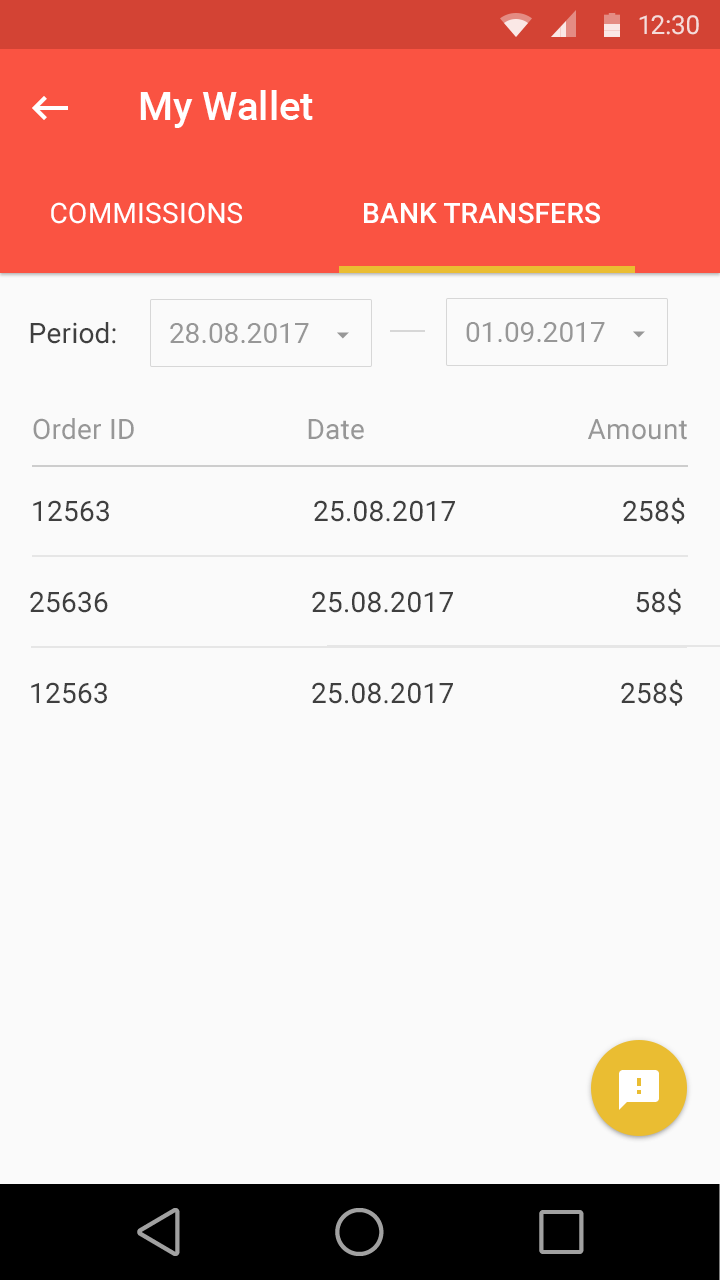
<style>
.page{position:relative;width:720px;height:1280px;background:#fafafa}
.page>*{position:absolute;margin:0}
.t1{font:40px "Roboto-Medium";color:#ffffff}
.t2{font:28px "Roboto-Regular";letter-spacing:0.01em;color:#ffffff;text-transform:uppercase}
.t3{font:28px "Roboto-Medium";letter-spacing:0.01em;color:#ffffff;text-transform:uppercase}
.t4{font:28px "Roboto-Regular";letter-spacing:0.01em;color:#3f3f3f}
.t5{font:28px "Roboto-Regular";color:#979797}
.t6{font:28px "Roboto-Regular";letter-spacing:0.01em;color:#979797}
</style>
<div class="page">
<p class="t1" style="left:140px;top:90px;width:173px;height:38px">My Wallet</p>
<p class="t2" style="left:51px;top:202px;width:191px;height:22px">Commissions</p>
<p class="t3" style="left:364px;top:202px;width:236px;height:22px">Bank Transfers</p>
<p class="t4" style="left:30px;top:322px;width:86px;height:22px">Period:</p>
<p class="t5" style="left:170px;top:323px;width:139px;height:20px">28.08.2017</p>
<p class="t5" style="left:466px;top:322px;width:139px;height:20px">01.09.2017</p>
<p class="t6" style="left:33px;top:418px;width:101px;height:22px">Order ID</p>
<p class="t6" style="left:308px;top:419px;width:56px;height:21px">Date</p>
<p class="t6" style="left:588px;top:419px;width:99px;height:21px">Amount</p>
<p class="t4" style="left:33px;top:497px;width:652px;height:27px">12563                            25.08.2017                       258$</p>
<p class="t4" style="left:30px;top:588px;width:651px;height:27px">25636                            25.08.2017                         58$</p>
<p class="t4" style="left:31px;top:679px;width:652px;height:27px">12563                            25.08.2017                       258$</p>
</div>
